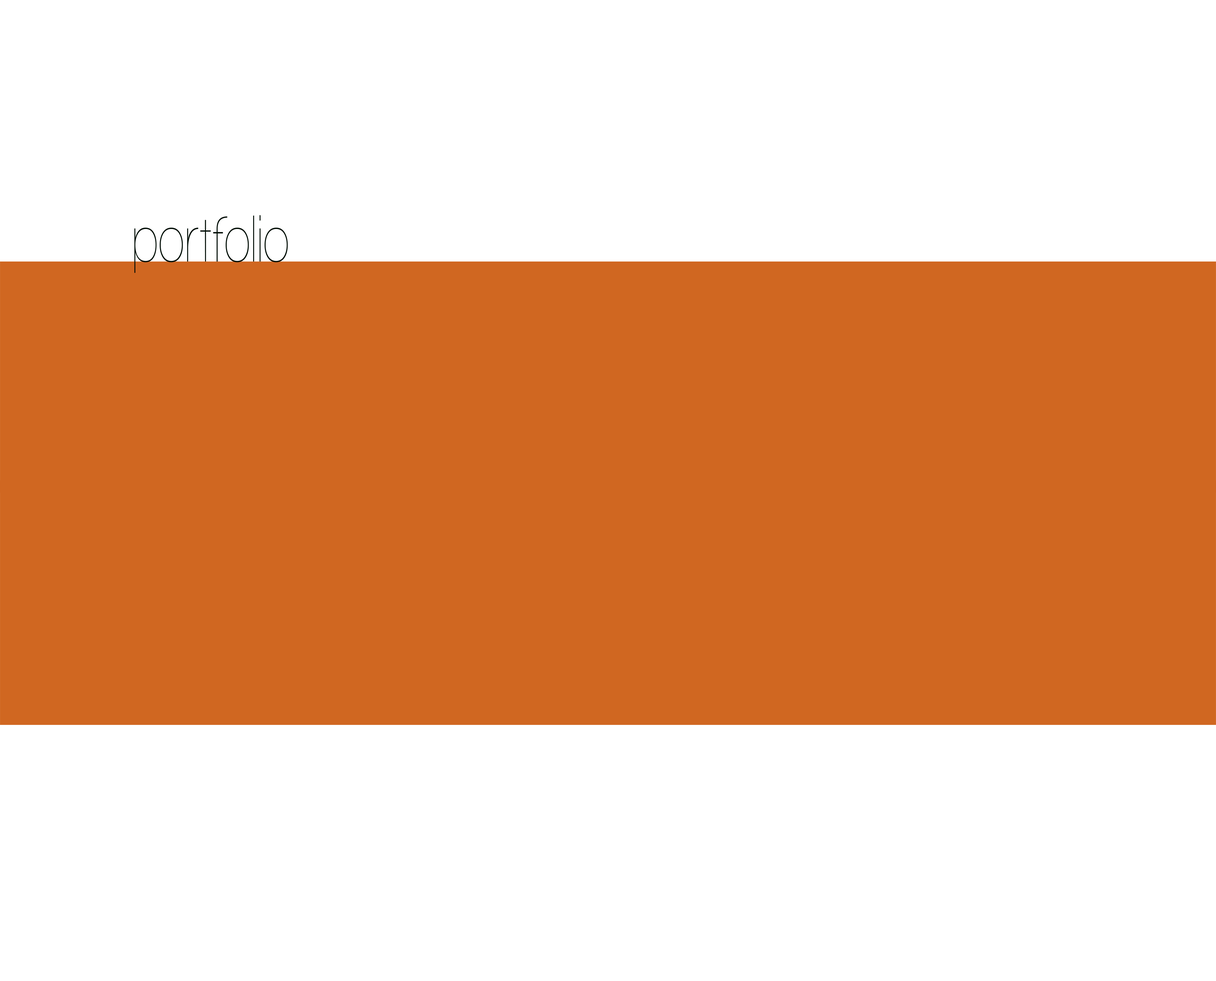
<style>
.page{position:relative;width:1216px;height:981px;background:#ffffff}
.page>*{position:absolute;margin:0}
.t1{font:67.6px "WalkwayCondensed";color:#020e06}
</style>
<div class="page">
<p class="t1" style="left:134px;top:215px;width:154px;height:58px">portfolio</p>
</div>
